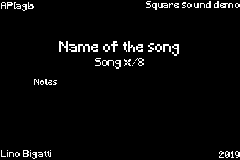
<style>
.page{position:relative;width:240px;height:160px;background:#000000}
.page>*{position:absolute;margin:0}
.t1{font:9px "Minecraft";color:#ffffff}
.t2{font:14px "Minecraft";color:#ffffff}
.t3{font:11px "Minecraft";color:#ffffff}
.t4{font:8px "Minecraft";color:#ffffff}
</style>
<div class="page">
<p class="t1" style="left:1px;top:2px;width:33px;height:9px">APIagb</p>
<p class="t1" style="left:146px;top:1px;width:94px;height:9px">Square sound demo</p>
<p class="t2" style="left:59px;top:41px;width:120px;height:15px">Name of the song</p>
<p class="t3" style="left:95px;top:58px;width:49px;height:11px">Song x/8</p>
<p class="t4" style="left:34px;top:79px;width:23px;height:6px">Notes</p>
<p class="t1" style="left:1px;top:150px;width:50px;height:9px">Lino Bigatti</p>
<p class="t1" style="left:219px;top:151px;width:21px;height:7px">2019</p>
</div>
